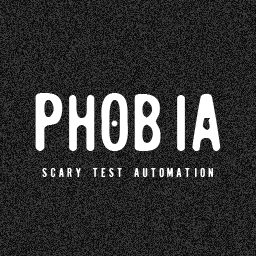
<style>
.page{position:relative;width:256px;height:256px}
.page>*{position:absolute;margin:0}
.t1{font:72px "SugarCube";color:#ffffff}
.t2{font:11px "SugarCube";letter-spacing:0.29em;color:#ffffff}
</style>
<div class="page">
<p class="t1" style="left:35px;top:93px;width:186px;height:58px">Phobia</p>
<p class="t2" style="left:42px;top:168px;width:171px;height:9px">SCARY TEST AUTOMATION</p>
</div>
